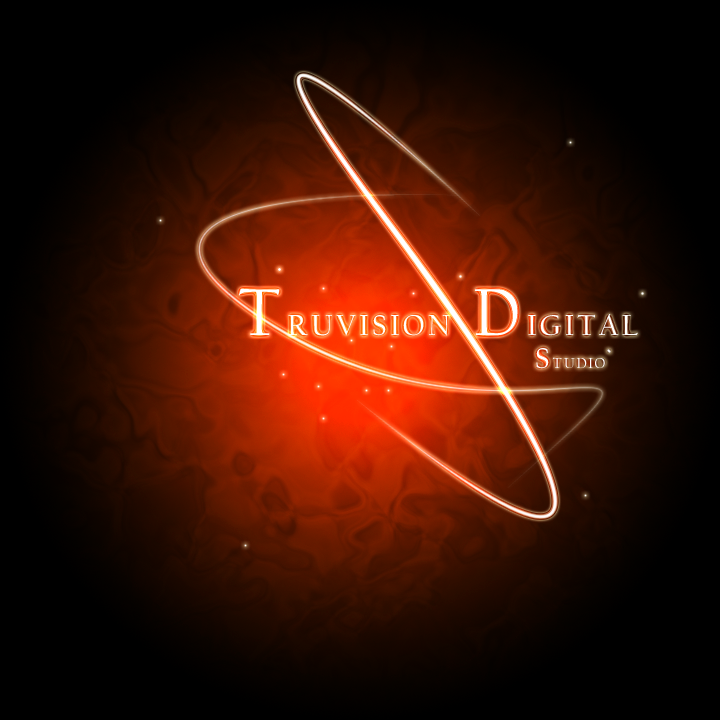
<style>
.page{position:relative;width:720px;height:720px;background:#000000}
.page>*{position:absolute;margin:0}
.t1{font:30px "CalifornianFB-Reg";letter-spacing:0.1em;color:#ffffff}
.t2{font:69px "CalifornianFB-Reg";letter-spacing:0.1em;color:#ffffff}
.t3{font:15px "CalifornianFB-Reg";letter-spacing:0.1em;color:#ffffff}
</style>
<div class="page">
<p class="t1" style="left:239px;top:288px;width:399px;height:48px"><span class="t2">T</span>RUVISION    <span class="t2">D</span>IGITAL</p>
<p class="t3" style="left:536px;top:348px;width:69px;height:21px"><span class="t1">S</span>TUDIO</p>
</div>
